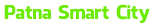
<style>
.page{position:relative;width:152px;height:28px;background:#ffffff}
.page>*{position:absolute;margin:0}
.t1{font:18.7px "FacebookLetterFaces";letter-spacing:-0.025em;color:#6aeb01}
</style>
<div class="page">
<p class="t1" style="left:4px;top:4px;width:146px;height:19px">Patna Smart City</p>
</div>
